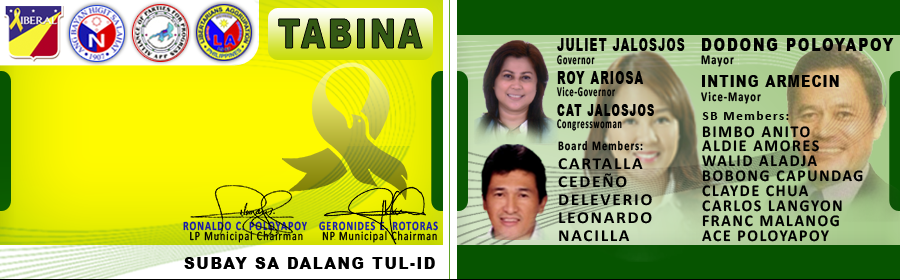
<style>
.page{position:relative;width:900px;height:280px}
.page>*{position:absolute;margin:0}
.t1{font:41.2px "Arial-Black";letter-spacing:0.1em;color:#345915;scale:0.74 1}
.t2{font:18.3px/11.7px "Arial-Black";letter-spacing:0.1em;color:#000000;scale:0.6 1}
.t3{font:13.4px/11.7px "Calibri-Bold";letter-spacing:0.1em;color:#000000;scale:0.6 1}
.t4{font:13.4px/13.4px "Calibri-Bold";letter-spacing:0.1em;color:#000000;scale:0.6 1}
.t5{font:18.3px/20.1px "Arial-Black";letter-spacing:0.1em;color:#000000;scale:0.6 1}
.t6{font:17.1px/20.1px "Arial-Black";letter-spacing:0.1em;color:#000000;scale:0.6 1}
.t7{font:18.2px/13.4px "Arial-Black";letter-spacing:0.1em;color:#000000;scale:0.79 1}
.t8{font:13.4px/13.4px "Calibri-Bold";letter-spacing:0.1em;color:#000000;scale:0.79 1}
.t9{font:16.2px/23.4px "Arial-Black";letter-spacing:0.1em;color:#000000;scale:0.79 1}
.t10{font:16.2px/20.1px "Arial-Black";letter-spacing:0.1em;color:#000000;scale:0.79 1}
.t11{font:13.3px "Calibri-Bold";letter-spacing:0.1em;color:#000000}
.t12{font:16.6px/14.9px "Calibri-Bold";letter-spacing:0.1em;color:#000000;scale:0.95 1}
.t13{font:13.3px "Calibri-Bold";letter-spacing:0.1em;color:#000000;scale:0.77 1}
.t14{font:16.6px/18px "Calibri-Bold";letter-spacing:0.1em;color:#000000;scale:1.05 1}
.t15{font:12.9px/10px "Calibri";letter-spacing:0.1em;color:#000000;scale:0.78 1}
.t16{font:12.9px/10px "Calibri-Bold";letter-spacing:0.1em;color:#1718ab;scale:0.78 1}
.t17{font:12.9px/10px "Calibri";letter-spacing:0.1em;color:#000000;scale:0.77 1}
.t18{font:12.9px/10px "Calibri-Bold";letter-spacing:0.1em;color:#191eb0;scale:0.77 1}
.t19{font:16.3px "Arial-Black";letter-spacing:0.1em;color:#000000;scale:0.92 1}
</style>
<div class="page">
<p class="t1" style="left:278px;top:19px;width:145px;height:29px">TABINA</p>
<p class="t2" style="left:556px;top:38px;width:129px;height:93px">JULIET JALOSJOS<br><span class="t3">Governo</span><span class="t4">r<br></span><span class="t5">ROY ARIOSA<br></span><span class="t3">Vice-Governor<br></span><span class="t6">CAT JALOSJOS<br></span><span class="t3">Congresswoman</span></p>
<p class="t7" style="left:701px;top:38px;width:193px;height:66px">DODONG POLOYAPOY<br><span class="t8">Mayor<br></span><span class="t9">INTING</span><span class="t10"> ARMECIN<br></span><span class="t8">Vice-Mayor</span></p>
<p class="t11" style="left:702px;top:111px;width:87px;height:9px">SB Members:</p>
<p class="t12" style="left:702px;top:126px;width:161px;height:116px">BIMBO ANITO<br>ALDIE AMORES<br>WALID ALADJA<br>BOBONG CAPUNDAG<br>CLAYDE CHUA<br>CARLOS LANGYON<br>FRANC MALANOG<br>ACE POLOYAPOY</p>
<p class="t13" style="left:558px;top:140px;width:85px;height:11px">Board Members:</p>
<p class="t14" style="left:558px;top:158px;width:94px;height:84px">CARTALLA<br>CEDEÑO<br>DELEVERIO<br>LEONARDO<br>NACILLA</p>
<p class="t15" style="left:183px;top:221px;width:124px;height:22px"><span class="t16">RONALDO C. POLOYAPOY<br></span>  LP Municipal Chairman</p>
<p class="t17" style="left:319px;top:221px;width:119px;height:22px"><span class="t18">GERONIDES E. ROTORAS<br></span> NP Municipal Chairman</p>
<p class="t19" style="left:184px;top:257px;width:251px;height:12px">SUBAY SA DALANG TUL-ID</p>
</div>
